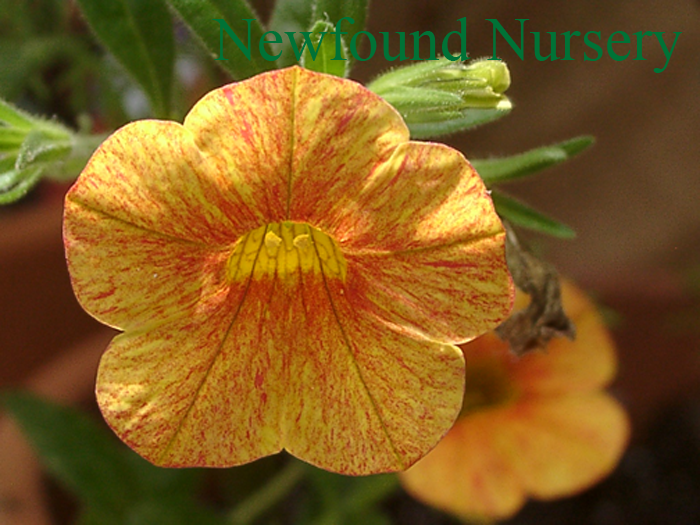
<style>
.page{position:relative;width:700px;height:525px}
.page>*{position:absolute;margin:0}
.t1{font:61.1px "TimesNewRomanPSMT";color:#007236}
</style>
<div class="page">
<p class="t1" style="left:212px;top:17px;width:471px;height:56px">Newfound Nursery</p>
</div>
